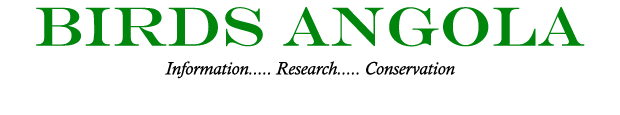
<style>
.page{position:relative;width:620px;height:115px;background:#ffffff}
.page>*{position:absolute;margin:0}
.t1{font:18px "CalistoMT-Italic";color:#000000}
.t2{font:55px "EngraversMT";color:#00850d}
</style>
<div class="page">
<p class="t1" style="left:36px;top:7px;width:549px;height:72px;text-align:center"><span class="t2">Birds Angola<br><br></span>Information..... Research..... Conservation</p>
</div>
